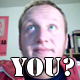
<style>
.page{position:relative;width:80px;height:80px}
.page>*{position:absolute;margin:0}
.t1{font:24px "StencilStd";color:#ffffff}
</style>
<div class="page">
<p class="t1" style="left:11px;top:58px;width:63px;height:18px">YOU?</p>
</div>
